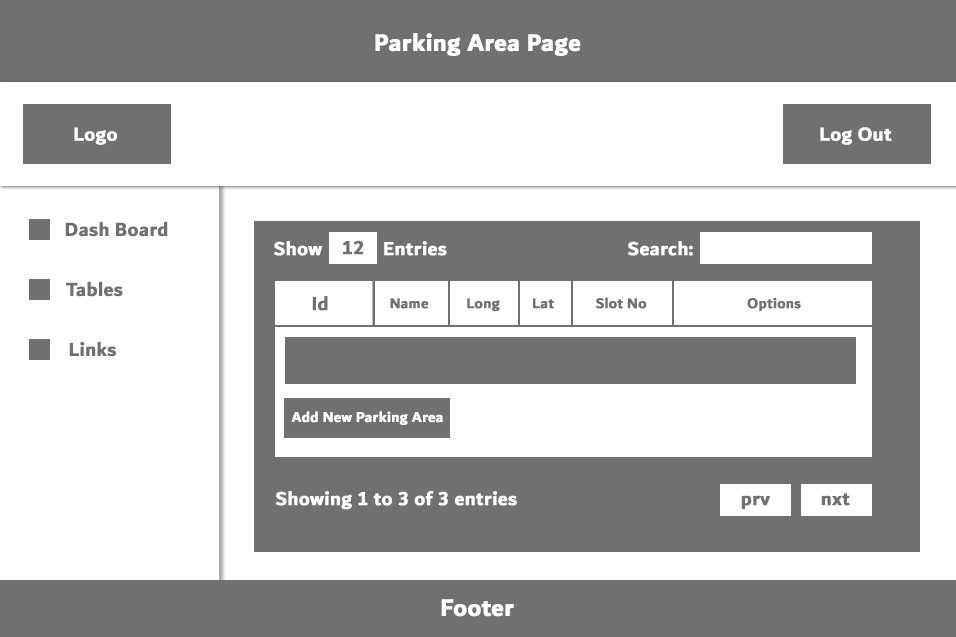
<style>
.page{position:relative;width:956px;height:637px;background:#ffffff}
.page>*{position:absolute;margin:0}
.t1{font:25px "DubaiW23-Bold";color:#ffffff;font-weight:bold}
.t2{font:20px "DubaiW23-Bold";color:#ffffff;font-weight:bold}
.t3{font:20px "DubaiW23-Bold";color:#707070;font-weight:bold}
.t4{font:15px "DubaiW23-Bold";color:#707070;font-weight:bold}
.t5{font:15px "DubaiW23-Bold";color:#ffffff;font-weight:bold}
</style>
<div class="page">
<p class="t1" style="left:375px;top:33px;width:206px;height:23px">Parking Area Page</p>
<p class="t2" style="left:74px;top:127px;width:43px;height:18px">Logo</p>
<p class="t2" style="left:820px;top:127px;width:72px;height:18px">Log Out</p>
<p class="t3" style="left:65px;top:221px;width:103px;height:16px">Dash Board</p>
<p class="t2" style="left:274px;top:241px;width:173px;height:15px">Show            Entries</p>
<p class="t3" style="left:342px;top:240px;width:21px;height:15px">12</p>
<p class="t2" style="left:627px;top:241px;width:66px;height:15px">Search:</p>
<p class="t3" style="left:66px;top:281px;width:57px;height:16px">Tables</p>
<p class="t3" style="left:312px;top:296px;width:16px;height:15px">Id</p>
<p class="t4" style="left:390px;top:298px;width:39px;height:11px">Name</p>
<p class="t4" style="left:467px;top:298px;width:33px;height:14px">Long</p>
<p class="t4" style="left:533px;top:298px;width:21px;height:11px">Lat</p>
<p class="t4" style="left:595px;top:297px;width:52px;height:12px">Slot No</p>
<p class="t4" style="left:747px;top:297px;width:54px;height:14px">Options</p>
<p class="t3" style="left:69px;top:341px;width:47px;height:16px">Links</p>
<p class="t5" style="left:291px;top:411px;width:152px;height:14px">Add New Parking Area</p>
<p class="t2" style="left:275px;top:491px;width:242px;height:19px">Showing 1 to 3 of 3 entries</p>
<p class="t3" style="left:741px;top:495px;width:29px;height:14px">prv</p>
<p class="t3" style="left:821px;top:493px;width:29px;height:13px">nxt</p>
<p class="t1" style="left:441px;top:599px;width:73px;height:18px">Footer</p>
</div>
